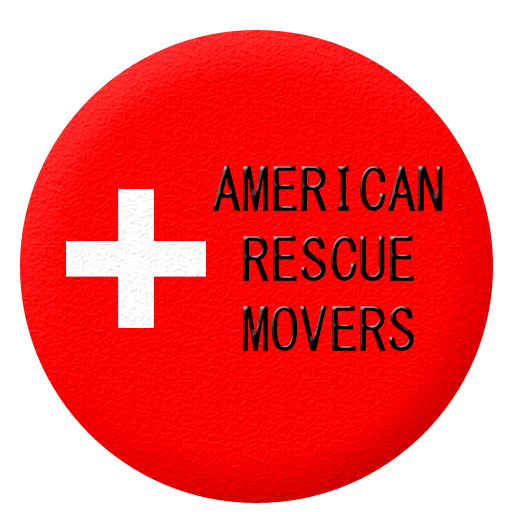
<style>
.page{position:relative;width:512px;height:512px;background:#ffffff}
.page>*{position:absolute;margin:0}
.t1{font:58.3px "MS-Gothic";color:#000000}
</style>
<div class="page">
<p class="t1" style="left:213px;top:166px;width:230px;height:185px;text-align:center">AMERICAN<br>RESCUE<br>MOVERS</p>
</div>
